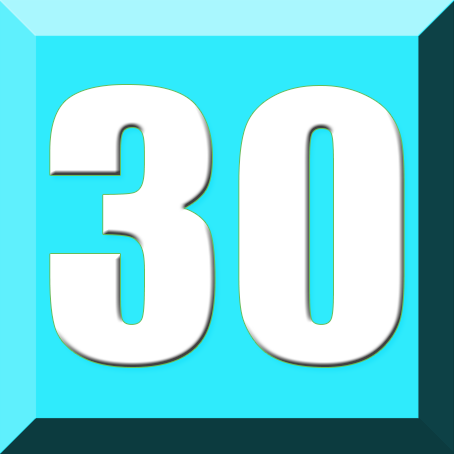
<style>
.page{position:relative;width:454px;height:454px;background:#2febfc}
.page>*{position:absolute;margin:0}
.t1{font:342.6px "Impact";color:#ffffff;scale:1.03 1}
</style>
<div class="page">
<p class="t1" style="left:50px;top:84px;width:354px;height:283px">30</p>
<p class="t1" style="left:53px;top:84px;width:348px;height:283px">26</p>
<p class="t1" style="left:53px;top:85px;width:348px;height:282px">29</p>
<p class="t1" style="left:55px;top:85px;width:345px;height:282px">20</p>
<p class="t1" style="left:55px;top:85px;width:347px;height:282px">25</p>
<p class="t1" style="left:56px;top:85px;width:346px;height:282px">28</p>
<p class="t1" style="left:58px;top:84px;width:343px;height:283px">23</p>
</div>
